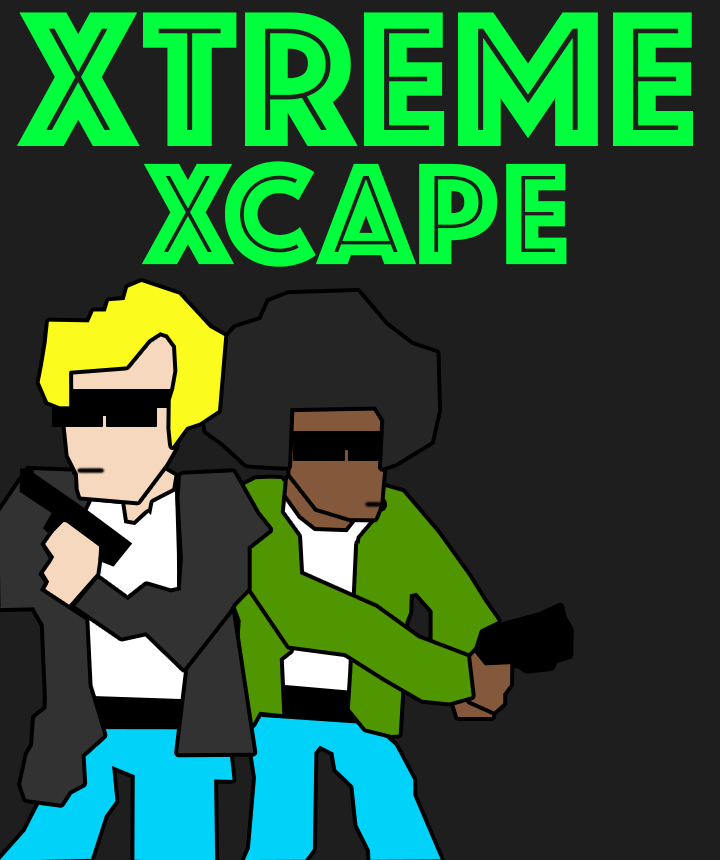
<style>
.page{position:relative;width:720px;height:860px;background:#1e1e1e}
.page>*{position:absolute;margin:0}
.t1{font:200px "Phosphate-Inline";letter-spacing:0.01em;color:#00ff3c}
.t2{font:150px "Phosphate-Inline";letter-spacing:0.01em;color:#00ff3c}
</style>
<div class="page">
<p class="t1" style="left:17px;top:12px;width:676px;height:134px">XTREME</p>
<p class="t2" style="left:142px;top:161px;width:425px;height:106px">XCAPE</p>
</div>
